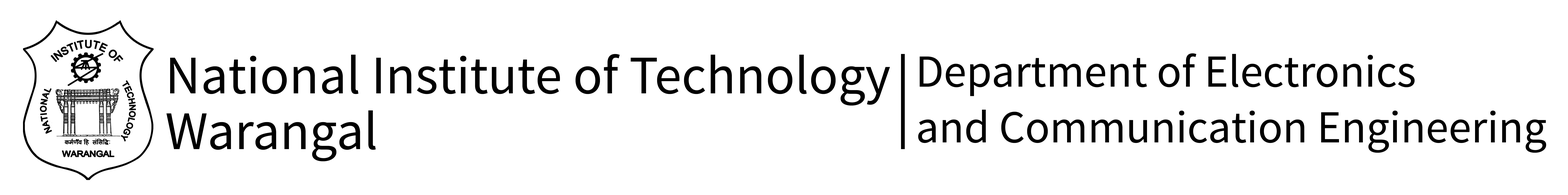
<style>
.page{position:relative;width:1568px;height:195px;background:#ffffff}
.page>*{position:absolute;margin:0}
.t1{font:54.2px/27.8px "SourceSansPro-Regular";color:#000000}
.t2{font:45.9px/27.8px "SourceSansPro-Regular";color:#000000}
</style>
<div class="page">
<p class="t1" style="left:166px;top:54px;width:724px;height:107px">National Institute of Technology <br><br>Warangal</p>
<p class="t2" style="left:918px;top:53px;width:628px;height:99px">Department of Electronics <br><br>and Communication Engineering</p>
</div>
